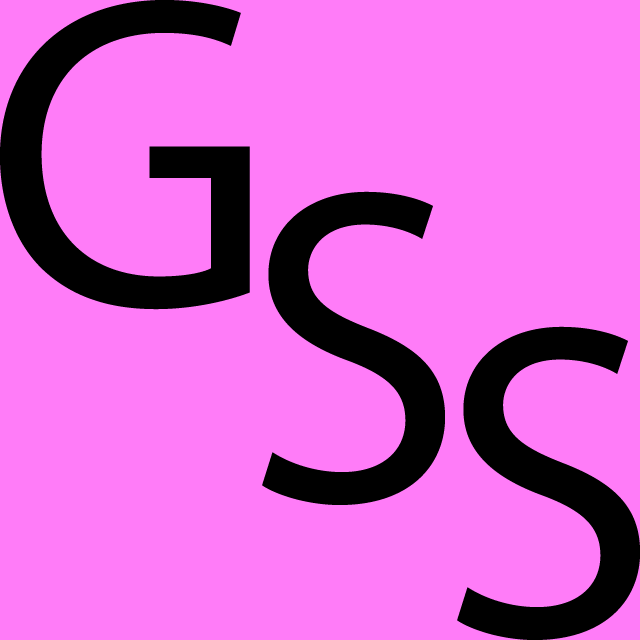
<style>
.page{position:relative;width:640px;height:640px;background:#ff7cf8}
.page>*{position:absolute;margin:0}
.t1{font:450px "MyriadPro-Regular";color:#000000}
</style>
<div class="page">
<p class="t1" style="left:0px;top:0px;width:250px;height:310px">G</p>
<p class="t1" style="left:262px;top:191px;width:183px;height:314px">S</p>
<p class="t1" style="left:457px;top:326px;width:183px;height:314px">S</p>
</div>
